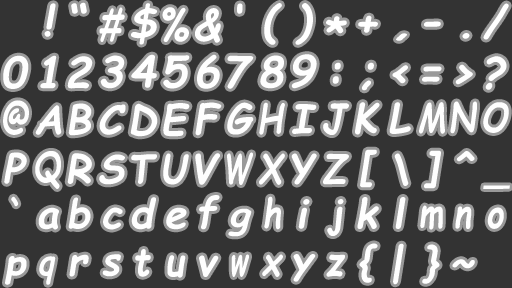
<style>
.page{position:relative;width:512px;height:288px;background:#333333}
.page>*{position:absolute;margin:0}
.t1{font:41px "ComicSansMS-BoldItalic";color:#ffffff;scale:1.04 1}
.t2{font:42.7px "ComicSansMS-BoldItalic";color:#ffffff}
.t3{font:40.3px "ComicSansMS-BoldItalic";color:#ffffff}
.t4{font:42px "ComicSansMS-BoldItalic";color:#ffffff}
.t5{font:42.7px "ComicSansMS-BoldItalic";color:#ffffff;scale:0.66 1}
.t6{font:42.7px "ComicSansMS-BoldItalic";color:#ffffff;scale:0.91 1}
.t7{font:31.5px "ComicSansMS-BoldItalic";color:#ffffff;scale:1.68 1}
.t8{font:42.7px "ComicSansMS-BoldItalic";color:#fefefe}
.t9{font:40px "ComicSansMS-BoldItalic";color:#fefefe;scale:0.75 1}
.t10{font:40px "ComicSansMS-BoldItalic";color:#fefefe}
.t11{font:40px "ComicSansMS-BoldItalic";color:#fefefe;scale:0.95 1}
.t12{font:40px "ComicSansMS-BoldItalic";color:#fefefe;scale:0.81 1}
.t13{font:40px "ComicSansMS-BoldItalic";color:#fefefe;scale:0.79 1}
.t14{font:40px "ComicSansMS-BoldItalic";color:#fefefe;scale:0.83 1}
.t15{font:40px "ComicSansMS-BoldItalic";color:#fefefe;scale:0.91 1}
.t16{font:40px "ComicSansMS-BoldItalic";color:#fefefe;scale:0.78 1}
.t17{font:40px "ComicSansMS-BoldItalic";color:#fefefe;scale:0.93 1}
.t18{font:40px "ComicSansMS-BoldItalic";color:#fefefe;scale:0.9 1}
.t19{font:40.6px "ComicSansMS-BoldItalic";color:#fefefe;scale:0.65 1}
.t20{font:38.4px "ComicSansMS-BoldItalic";color:#fefefe}
.t21{font:35.7px "ComicSansMS-BoldItalic";color:#fefefe;scale:1.07 1}
.t22{font:36.2px "ComicSansMS-BoldItalic";color:#fefefe}
.t23{font:35.1px "ComicSansMS-BoldItalic";color:#fefefe;scale:1.14 1}
.t24{font:36.1px "ComicSansMS-BoldItalic";color:#fefefe;scale:0.86 1}
</style>
<div class="page">
<p class="t1" style="left:44px;top:3px;width:12px;height:34px">!</p>
<p class="t2" style="left:71px;top:2px;width:16px;height:12px">“</p>
<p class="t3" style="left:131px;top:3px;width:27px;height:42px">$</p>
<p class="t2" style="left:237px;top:3px;width:6px;height:11px">‘</p>
<p class="t4" style="left:264px;top:3px;width:18px;height:42px">(</p>
<p class="t4" style="left:295px;top:3px;width:18px;height:42px">)</p>
<p class="t2" style="left:483px;top:3px;width:26px;height:37px">/</p>
<p class="t5" style="left:99px;top:7px;width:26px;height:35px;rotate:-1deg">#</p>
<p class="t6" style="left:162px;top:7px;width:27px;height:35px">%</p>
<p class="t2" style="left:195px;top:8px;width:26px;height:35px">&amp;</p>
<p class="t2" style="left:326px;top:16px;width:21px;height:18px">*</p>
<p class="t2" style="left:358px;top:15px;width:20px;height:18px">+</p>
<p class="t2" style="left:424px;top:21px;width:17px;height:6px">-</p>
<p class="t7" style="left:396px;top:33px;width:11px;height:8px">,</p>
<p class="t2" style="left:462px;top:33px;width:8px;height:6px">.</p>
<p class="t8" style="left:131px;top:54px;width:26px;height:34px">4</p>
<p class="t8" style="left:197px;top:54px;width:23px;height:35px">6</p>
<p class="t8" style="left:291px;top:54px;width:26px;height:35px">9</p>
<p class="t8" style="left:3px;top:55px;width:26px;height:34px">0</p>
<p class="t8" style="left:40px;top:55px;width:17px;height:34px">1</p>
<p class="t8" style="left:67px;top:56px;width:26px;height:33px">2</p>
<p class="t8" style="left:100px;top:55px;width:25px;height:34px">3</p>
<p class="t8" style="left:163px;top:55px;width:27px;height:34px">5</p>
<p class="t8" style="left:227px;top:55px;width:27px;height:34px">7</p>
<p class="t8" style="left:260px;top:55px;width:24px;height:34px">8</p>
<p class="t8" style="left:332px;top:62px;width:9px;height:22px">:</p>
<p class="t8" style="left:361px;top:62px;width:13px;height:29px">;</p>
<p class="t8" style="left:392px;top:65px;width:16px;height:19px">&lt;</p>
<p class="t8" style="left:455px;top:64px;width:18px;height:21px">&gt;</p>
<p class="t8" style="left:485px;top:56px;width:22px;height:34px">?</p>
<p class="t8" style="left:422px;top:66px;width:20px;height:16px">=</p>
<p class="t9" style="left:3px;top:100px;width:26px;height:35px">@</p>
<p class="t10" style="left:195px;top:102px;width:27px;height:34px">F</p>
<p class="t11" style="left:227px;top:102px;width:27px;height:33px">G</p>
<p class="t12" style="left:259px;top:102px;width:26px;height:33px">H</p>
<p class="t10" style="left:355px;top:102px;width:25px;height:33px">K</p>
<p class="t10" style="left:389px;top:102px;width:22px;height:32px">L</p>
<p class="t13" style="left:419px;top:102px;width:26px;height:32px">M</p>
<p class="t12" style="left:450px;top:101px;width:27px;height:33px">N</p>
<p class="t14" style="left:483px;top:102px;width:26px;height:31px">O</p>
<p class="t10" style="left:35px;top:105px;width:27px;height:30px">A</p>
<p class="t10" style="left:68px;top:103px;width:24px;height:33px">B</p>
<p class="t10" style="left:99px;top:104px;width:27px;height:31px">C</p>
<p class="t10" style="left:130px;top:103px;width:28px;height:34px">D</p>
<p class="t10" style="left:163px;top:103px;width:27px;height:34px">E</p>
<p class="t10" style="left:292px;top:104px;width:25px;height:30px">I</p>
<p class="t15" style="left:323px;top:103px;width:26px;height:32px">J</p>
<p class="t10" style="left:360px;top:149px;width:17px;height:39px">[</p>
<p class="t10" style="left:424px;top:150px;width:17px;height:39px">]</p>
<p class="t10" style="left:4px;top:152px;width:23px;height:32px">P</p>
<p class="t16" style="left:35px;top:151px;width:26px;height:38px">Q</p>
<p class="t10" style="left:67px;top:153px;width:25px;height:31px">R</p>
<p class="t11" style="left:99px;top:154px;width:26px;height:31px;rotate:-1deg">S</p>
<p class="t17" style="left:131px;top:154px;width:26px;height:30px;rotate:-2deg">T</p>
<p class="t18" style="left:163px;top:153px;width:26px;height:32px">U</p>
<p class="t10" style="left:195px;top:153px;width:25px;height:32px">V</p>
<p class="t19" style="left:227px;top:152px;width:26px;height:33px;rotate:-2deg">W</p>
<p class="t12" style="left:259px;top:153px;width:26px;height:32px">X</p>
<p class="t10" style="left:291px;top:153px;width:26px;height:32px">Y</p>
<p class="t14" style="left:323px;top:153px;width:26px;height:32px">Z</p>
<p class="t10" style="left:394px;top:153px;width:15px;height:33px">\</p>
<p class="t10" style="left:456px;top:151px;width:19px;height:11px">^</p>
<p class="t20" style="left:483px;top:185px;width:27px;height:4px">_</p>
<p class="t9" style="left:11px;top:196px;width:8px;height:11px">`</p>
<p class="t10" style="left:68px;top:197px;width:23px;height:32px">b</p>
<p class="t10" style="left:131px;top:197px;width:25px;height:33px">d</p>
<p class="t10" style="left:199px;top:195px;width:21px;height:35px">f</p>
<p class="t12" style="left:264px;top:196px;width:17px;height:34px">h</p>
<p class="t10" style="left:357px;top:197px;width:22px;height:32px">k</p>
<p class="t10" style="left:395px;top:197px;width:11px;height:32px">l</p>
<p class="t10" style="left:38px;top:207px;width:21px;height:23px">a</p>
<p class="t10" style="left:103px;top:207px;width:20px;height:23px">c</p>
<p class="t10" style="left:166px;top:207px;width:21px;height:23px">e</p>
<p class="t21" style="left:228px;top:208px;width:24px;height:29px">g</p>
<p class="t10" style="left:298px;top:199px;width:12px;height:30px">i</p>
<p class="t22" style="left:327px;top:199px;width:17px;height:37px">j</p>
<p class="t13" style="left:420px;top:205px;width:23px;height:25px">m</p>
<p class="t12" style="left:455px;top:206px;width:17px;height:23px">n</p>
<p class="t14" style="left:487px;top:207px;width:17px;height:22px">o</p>
<p class="t10" style="left:359px;top:243px;width:19px;height:40px">{</p>
<p class="t10" style="left:393px;top:243px;width:11px;height:42px">|</p>
<p class="t10" style="left:422px;top:244px;width:18px;height:40px">}</p>
<p class="t23" style="left:5px;top:256px;width:22px;height:29px">p</p>
<p class="t24" style="left:39px;top:256px;width:17px;height:29px">q</p>
<p class="t10" style="left:69px;top:254px;width:20px;height:23px">r</p>
<p class="t11" style="left:102px;top:254px;width:19px;height:23px;rotate:-1deg">s</p>
<p class="t17" style="left:135px;top:249px;width:16px;height:28px;rotate:-2deg">t</p>
<p class="t18" style="left:167px;top:255px;width:19px;height:23px">u</p>
<p class="t10" style="left:199px;top:255px;width:20px;height:22px">v</p>
<p class="t19" style="left:231px;top:254px;width:18px;height:23px;rotate:-2deg">w</p>
<p class="t12" style="left:262px;top:254px;width:21px;height:23px">x</p>
<p class="t23" style="left:293px;top:254px;width:23px;height:28px">y</p>
<p class="t14" style="left:326px;top:254px;width:19px;height:23px">z</p>
<p class="t10" style="left:452px;top:259px;width:23px;height:10px">~</p>
</div>
